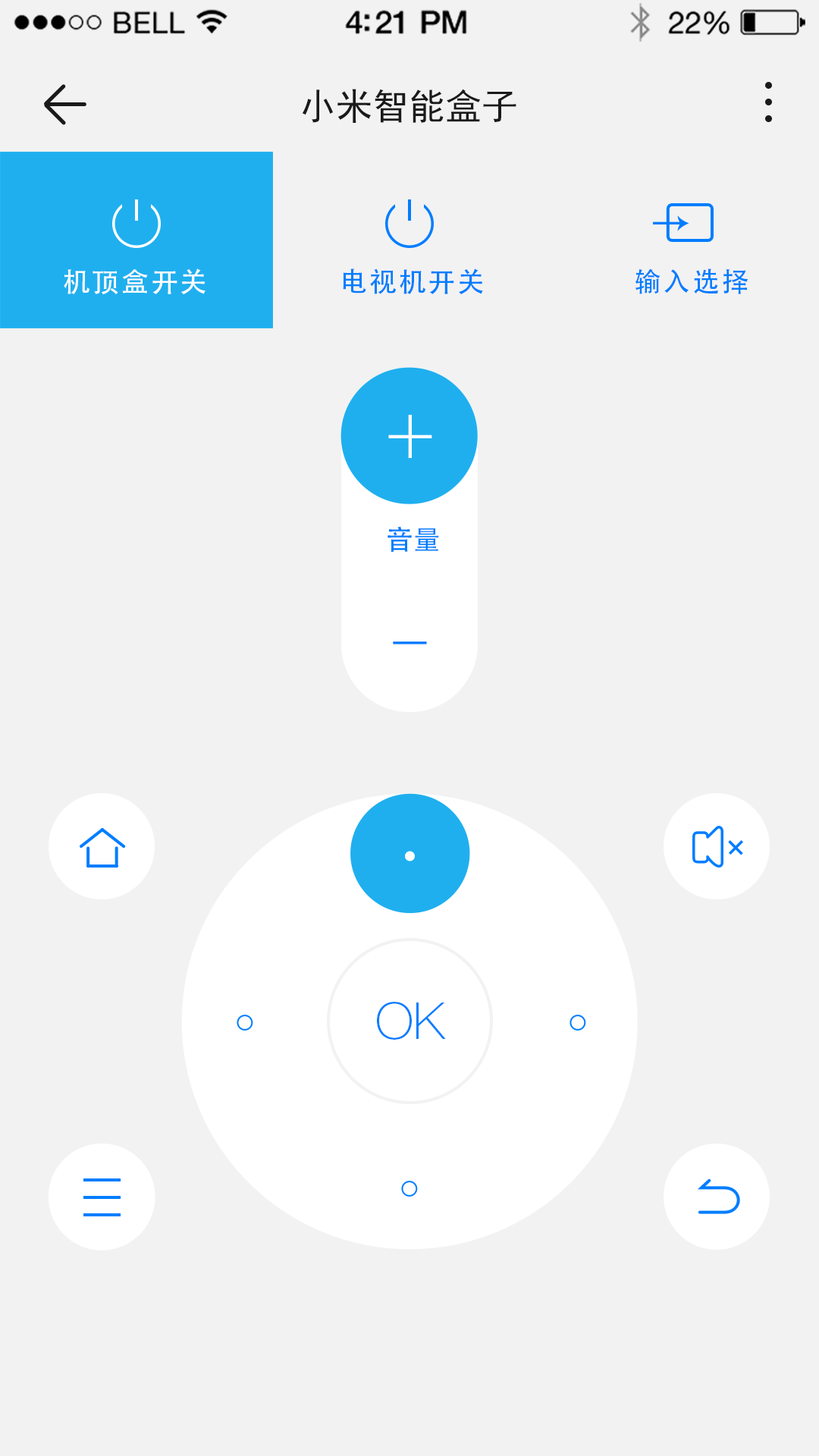
<style>
.page{position:relative;width:819px;height:1456px;background:#f2f2f2}
.page>*{position:absolute;margin:0}
.t1{font:36.4px "SimHei";color:#1a1a1a}
.t2{font:27.3px "AdobeHeitiStd-Regular";letter-spacing:0.075em;color:#007dff}
.t3{font:27.3px "AdobeHeitiStd-Regular";letter-spacing:0.075em;color:#ffffff}
.t4{font:85.3px "HelveticaNeueLTPro-Th";letter-spacing:0.02em;color:#ffffff}
.t5{font:71.3px "HelveticaNeueLTPro-Th";letter-spacing:0.02em;color:#ffffff}
.t6{font:27.3px "AdobeHeitiStd-Regular";letter-spacing:0.015em;color:#007dff}
.t7{font:68.2px "HelveticaNeueLTPro-Th";letter-spacing:0.027em;color:#007dff;scale:2.3 1}
.t8{font:51.2px "HelveticaNeueLTPro-Th";color:#007dff}
</style>
<div class="page">
<p class="t1" style="left:302px;top:89px;width:214px;height:34px">小米智能盒子</p>
<p class="t2" style="left:64px;top:268px;width:684px;height:26px">机顶盒开关                电视机开关                  输入选择</p>
<p class="t3" style="left:64px;top:268px;width:142px;height:26px">机顶盒开关</p>
<p class="t4" style="left:388px;top:415px;width:44px;height:43px">+</p>
<p class="t5" style="left:392px;top:419px;width:36px;height:36px">+</p>
<p class="t6" style="left:388px;top:526px;width:51px;height:26px">音量</p>
<p class="t7" style="left:393px;top:642px;width:34px;height:3px">-</p>
<p class="t8" style="left:377px;top:1002px;width:69px;height:38px">OK</p>
</div>
